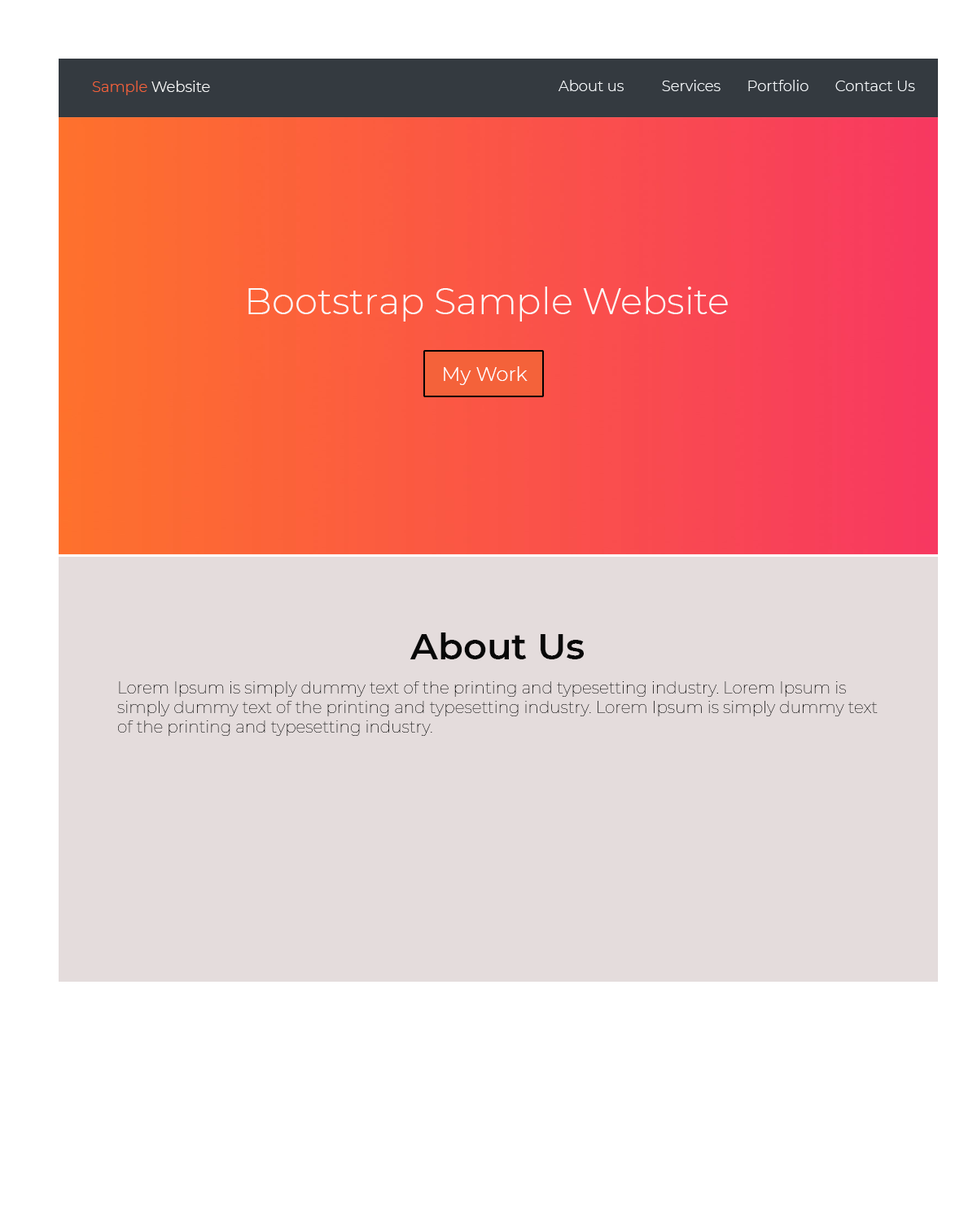
<style>
.page{position:relative;width:977px;height:1221px;background:#ffffff}
.page>*{position:absolute;margin:0}
.t1{font:14.7px "Montserrat-Light";color:#fcfdfd}
.t2{font:14.7px "Montserrat-Light";color:#f4623a}
.t3{font:14.7px "Montserrat-Light";color:#f6f9fc}
.t4{font:36.6px "Montserrat-Light";color:#fcf8f7}
.t5{font:19.5px "Montserrat-Light";color:#ffffff}
.t6{font:36.6px "Montserrat-SemiBold";color:#080808}
.t7{font:16.3px "Montserrat-Thin";color:#080808}
</style>
<div class="page">
<p class="t1" style="left:92px;top:81px;width:118px;height:14px"><span class="t2">Sample</span> Website</p>
<p class="t3" style="left:558px;top:80px;width:357px;height:11px">About us          Services       Portfolio       Contact Us</p>
<p class="t4" style="left:248px;top:286px;width:480px;height:35px">Bootstrap Sample Website</p>
<p class="t5" style="left:444px;top:366px;width:83px;height:19px">My Work</p>
<p class="t5" style="left:444px;top:366px;width:83px;height:19px">My Work</p>
<p class="t6" style="left:409px;top:632px;width:175px;height:27px">About Us</p>
<p class="t7" style="left:117px;top:681px;width:760px;height:55px">Lorem Ipsum is simply dummy text of the printing and typesetting industry. Lorem Ipsum is simply dummy text of the printing and typesetting industry. Lorem Ipsum is simply dummy text of the printing and typesetting industry.</p>
</div>
